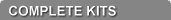
<style>
.page{position:relative;width:171px;height:20px;background:#858585}
.page>*{position:absolute;margin:0}
.t1{font:13.3px "Arial-BoldMT";color:#ffffff}
</style>
<div class="page">
<p class="t1" style="left:9px;top:5px;width:107px;height:11px">COMPLETE KITS</p>
</div>
